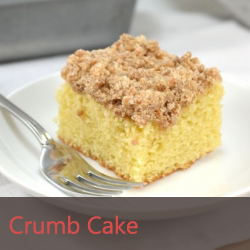
<style>
.page{position:relative;width:250px;height:250px}
.page>*{position:absolute;margin:0}
.t1{font:24px "MicrosoftTaiLe";color:#d64d4c}
</style>
<div class="page">
<p class="t1" style="left:9px;top:215px;width:129px;height:19px">Crumb Cake</p>
</div>
